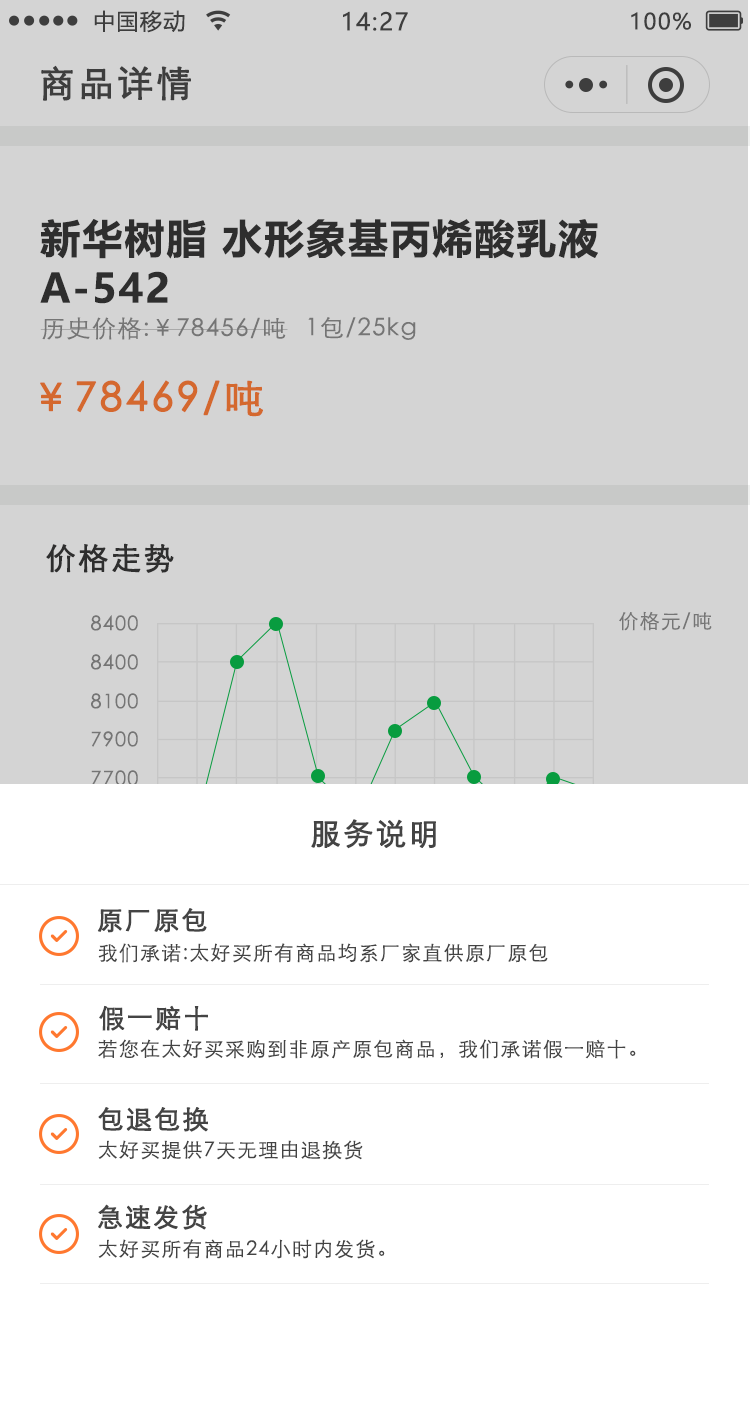
<style>
.page{position:relative;width:750px;height:1424px;background:#d4d4d4}
.page>*{position:absolute;margin:0}
.t1{font:22px "MicrosoftYaHei";letter-spacing:0.06em;color:#444444}
.t2{font:24px "MicrosoftYaHei";letter-spacing:0.06em;color:#444444}
.t3{font:36px "STXihei";letter-spacing:0.06em;color:#444444;font-weight:bold}
.t4{font:40px/50px "MicrosoftYaHei-Bold";letter-spacing:0.05em;color:#302f2f}
.t5{font:24px "STXihei";letter-spacing:0.06em;color:#888888}
.t6{font:40px "STXihei";letter-spacing:0.06em;color:#d4682e;font-weight:bold}
.t7{font:30px "STXihei";letter-spacing:0.06em;color:#302f2f;font-weight:bold}
.t8{font:20px "STXihei";letter-spacing:0.06em;color:#888888}
.t9{font:30px "STXihei";letter-spacing:0.06em;color:#444444;font-weight:bold}
.t10{font:26px "STXihei";letter-spacing:0.06em;color:#444444;font-weight:bold}
.t11{font:20px "STXihei";letter-spacing:0.06em;color:#444444}
</style>
<div class="page">
<p class="t1" style="left:94px;top:10px;width:91px;height:23px">中国移动</p>
<p class="t2" style="left:343px;top:11px;width:65px;height:20px">14:27</p>
<p class="t1" style="left:631px;top:12px;width:60px;height:18px">100%</p>
<p class="t3" style="left:41px;top:65px;width:150px;height:36px">商品详情</p>
<p class="t4" style="left:40px;top:219px;width:558px;height:85px">新华树脂 水形象基丙烯酸乳液<br>A-542</p>
<p class="t5" style="left:40px;top:317px;width:248px;height:23px">历史价格:￥78456/吨</p>
<p class="t5" style="left:308px;top:317px;width:108px;height:23px">1包/25kg</p>
<p class="t6" style="left:40px;top:380px;width:223px;height:37px">￥78469/吨</p>
<p class="t7" style="left:46px;top:543px;width:128px;height:30px">价格走势</p>
<p class="t8" style="left:91px;top:615px;width:47px;height:16px">8400</p>
<p class="t8" style="left:619px;top:611px;width:93px;height:20px">价格元/吨</p>
<p class="t8" style="left:91px;top:654px;width:47px;height:16px">8400</p>
<p class="t8" style="left:91px;top:693px;width:47px;height:16px">8100</p>
<p class="t8" style="left:91px;top:731px;width:47px;height:16px">7900</p>
<p class="t8" style="left:91px;top:770px;width:47px;height:16px">7700</p>
<p class="t9" style="left:311px;top:819px;width:125px;height:30px">服务说明</p>
<p class="t10" style="left:97px;top:908px;width:110px;height:25px">原厂原包</p>
<p class="t11" style="left:98px;top:943px;width:450px;height:20px">我们承诺:太好买所有商品均系厂家直供原厂原包</p>
<p class="t10" style="left:99px;top:1005px;width:109px;height:26px">假一赔十</p>
<p class="t11" style="left:98px;top:1039px;width:538px;height:20px">若您在太好买采购到非原产原包商品，我们承诺假一赔十。</p>
<p class="t10" style="left:98px;top:1107px;width:110px;height:25px">包退包换</p>
<p class="t11" style="left:98px;top:1140px;width:265px;height:20px">太好买提供7天无理由退换货</p>
<p class="t10" style="left:98px;top:1204px;width:109px;height:26px">急速发货</p>
<p class="t11" style="left:98px;top:1239px;width:287px;height:20px">太好买所有商品24小时内发货。</p>
</div>
